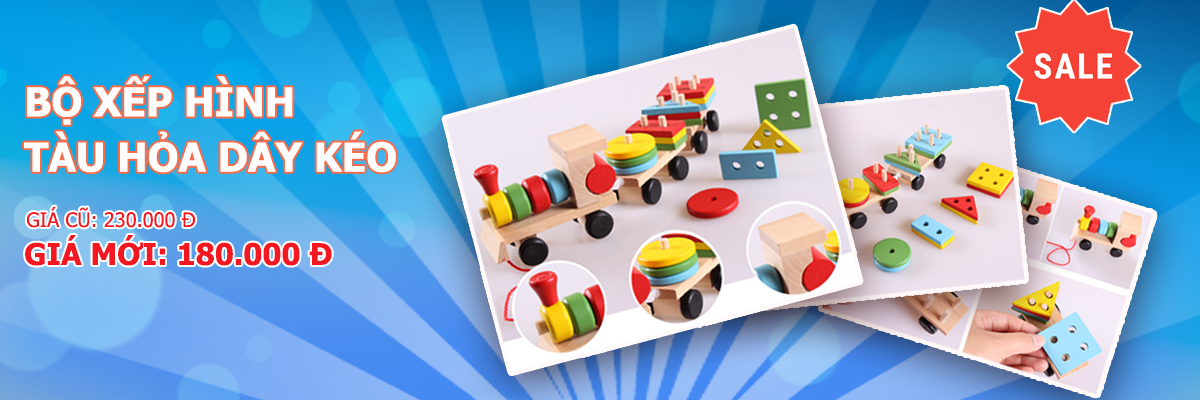
<style>
.page{position:relative;width:1200px;height:400px}
.page>*{position:absolute;margin:0}
.t1{font:40px/55.2px "Tahoma-Bold";color:#fefefe;text-transform:uppercase}
.t2{font:20px "Tahoma";color:#f31721;text-transform:uppercase}
.t3{font:30px "Tahoma-Bold";color:#f31721;text-transform:uppercase}
</style>
<div class="page">
<p class="t1" style="left:24px;top:76px;width:372px;height:97px">Bộ xếp hình <br>tàu hỏa dây kéo</p>
<p class="t2" style="left:27px;top:206px;width:169px;height:22px">giá cũ: 230.000 đ</p>
<p class="t3" style="left:25px;top:235px;width:307px;height:31px">giá mới: 180.000 đ</p>
</div>
